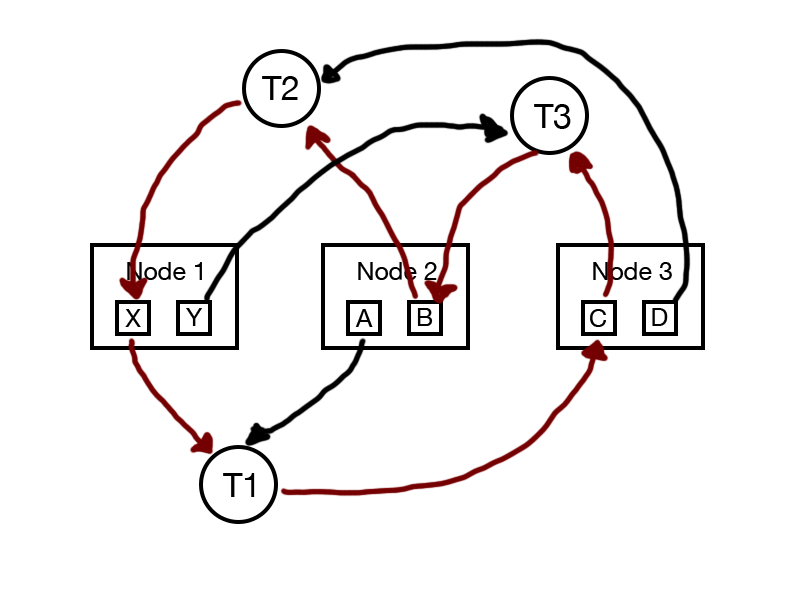
<style>
.page{position:relative;width:800px;height:600px;background:#ffffff}
.page>*{position:absolute;margin:0}
.t1{font:34px "HelveticaNeue";color:#000000}
.t2{font:25px "HelveticaNeue";color:#000000}
</style>
<div class="page">
<p class="t1" style="left:262px;top:76px;width:36px;height:24px">T2</p>
<p class="t1" style="left:534px;top:104px;width:37px;height:25px">T3</p>
<p class="t2" style="left:127px;top:262px;width:75px;height:18px">Node 1</p>
<p class="t2" style="left:358px;top:262px;width:79px;height:18px">Node 2</p>
<p class="t2" style="left:593px;top:262px;width:79px;height:18px">Node 3</p>
<p class="t2" style="left:125px;top:309px;width:16px;height:18px">X</p>
<p class="t2" style="left:186px;top:308px;width:17px;height:18px">Y</p>
<p class="t2" style="left:355px;top:309px;width:18px;height:18px">A</p>
<p class="t2" style="left:417px;top:308px;width:16px;height:18px">B</p>
<p class="t2" style="left:590px;top:309px;width:16px;height:18px">C</p>
<p class="t2" style="left:652px;top:308px;width:16px;height:18px">D</p>
<p class="t1" style="left:223px;top:473px;width:32px;height:24px">T1</p>
</div>
